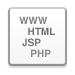
<style>
.page{position:relative;width:75px;height:75px;background:#ffffff}
.page>*{position:absolute;margin:0}
.t1{font:10px/11px "Helvetica-Bold";color:#6c6c6c}
</style>
<div class="page">
<p class="t1" style="left:19px;top:16px;width:36px;height:41px">WWW<br>   HTML<br> JSP<br>    PHP</p>
</div>
